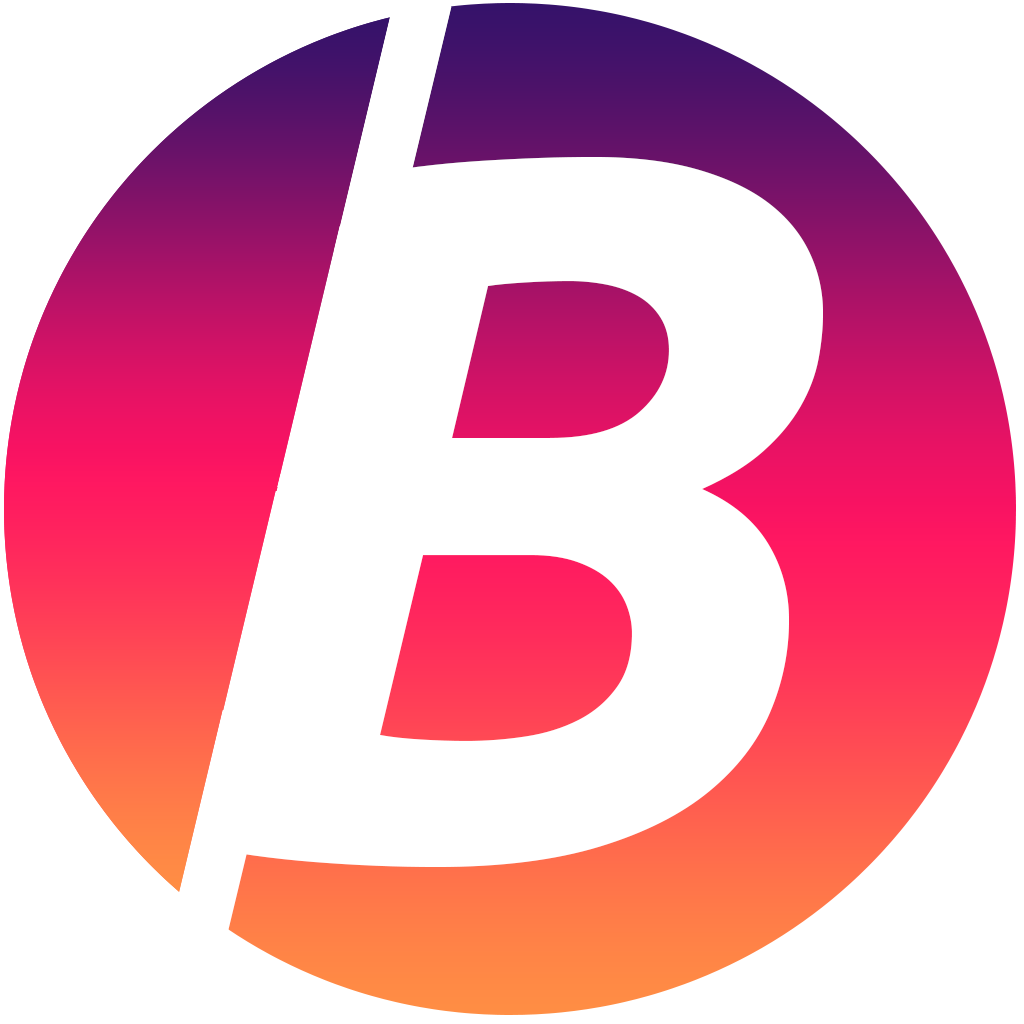
<style>
.page{position:relative;width:1024px;height:1024px;background:#ffffff}
.page>*{position:absolute;margin:0}
.t1{font:375.5px "Ubuntu-BoldItalic";color:#ffffff}
.t2{font:1000px "Ubuntu-BoldItalic";color:#ffffff}
</style>
<div class="page">
<p class="t1" style="left:330px;top:7px;width:122px;height:261px">I</p>
<p class="t2" style="left:200px;top:157px;width:623px;height:710px">B</p>
<p class="t1" style="left:277px;top:226px;width:122px;height:261px">I</p>
<p class="t1" style="left:218px;top:474px;width:122px;height:261px">I</p>
<p class="t1" style="left:213px;top:491px;width:122px;height:261px">I</p>
<p class="t1" style="left:160px;top:710px;width:122px;height:261px">I</p>
</div>
